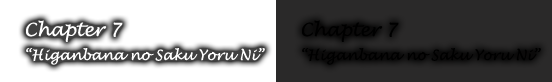
<style>
.page{position:relative;width:552px;height:82px;background:#ffffff}
.page>*{position:absolute;margin:0}
.t1{font:14px "LucidaHandwriting-Italic";color:#000000}
.t2{font:18px "LucidaHandwriting-Italic";color:#000000}
</style>
<div class="page">
<p class="t1" style="left:302px;top:20px;width:239px;height:45px"><span class="t2">Chapter 7<br><br></span>“Higanbana no Saku Yoru Ni”</p>
</div>
